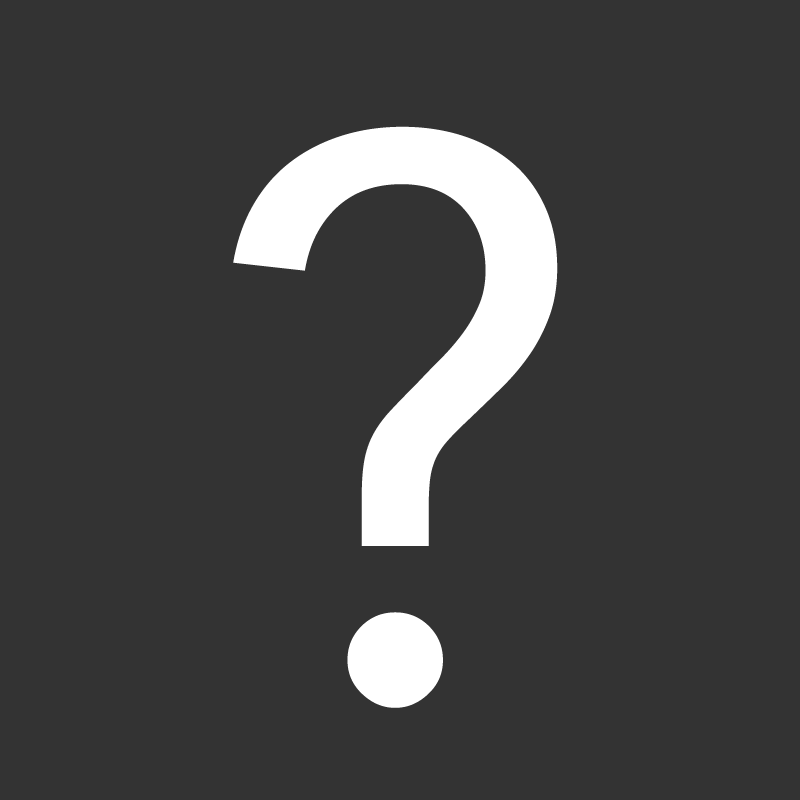
<style>
.page{position:relative;width:800px;height:800px;background:#333333}
.page>*{position:absolute;margin:0}
.t1{font:793.4px "Avenir-Roman";color:#ffffff}
</style>
<div class="page">
<p class="t1" style="left:233px;top:126px;width:325px;height:582px">?</p>
</div>
